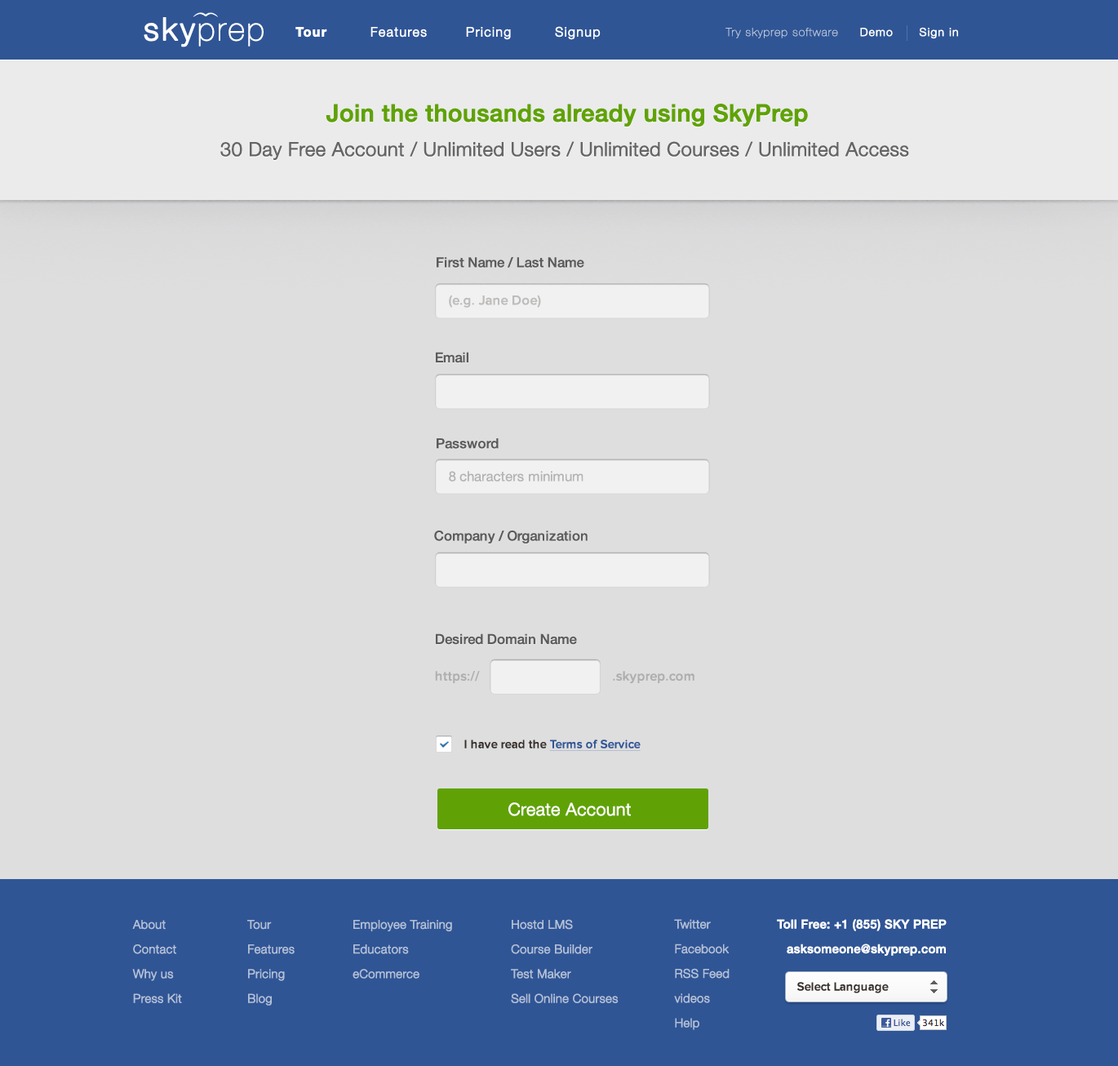
<style>
.page{position:relative;width:1118px;height:1066px;background:#dededf}
.page>*{position:absolute;margin:0}
.t1{font:31.8px "HelveticaNeue-UltraLight";letter-spacing:0.06em;color:#ffffff;font-weight:bold}
.t2{font:31.8px "HelveticaNeue-Light";letter-spacing:0.06em;color:#ffffff;font-weight:bold}
.t3{font:13px "HelveticaNeue-Light";letter-spacing:0.06em;color:#ffffff;font-weight:bold}
.t4{font:13px "HelveticaNeue-Bold";letter-spacing:0.06em;color:#ffffff;font-weight:bold}
.t5{font:11.1px "HelveticaNeue-UltraLight";letter-spacing:0.06em;color:#bac5d9;font-weight:bold}
.t6{font:11.1px "HelveticaNeue-Light";letter-spacing:0.06em;color:#ffffff;font-weight:bold}
.t7{font:23.7px "HelveticaNeue-Medium";color:#60a205;font-weight:bold}
.t8{font:19.1px "HelveticaNeue-Light";color:#656565;font-weight:bold}
.t9{font:13.7px "HelveticaNeue-Medium";color:#5b5b5b}
.t10{font:13.7px "ProximaNova-Semibold";color:#bebdbc}
.t11{font:13.7px "HelveticaNeue";color:#b3b3b3}
.t12{font:13.7px "ProximaNova-Semibold";color:#b0aeae}
.t13{font:12.2px "ProximaNova-Semibold";color:#2f5595;text-decoration:underline}
.t14{font:12.2px "ProximaNova-Semibold";color:#372f2b}
.t15{font:17.2px "HelveticaNeue-Light";color:#ffffff;font-weight:bold}
.t16{font:12.1px/24.7px "HelveticaNeue-Light";color:#b4c0d6;font-weight:bold}
.t17{font:12.1px/24.7px "HelveticaNeue-Medium";color:#ffffff;font-weight:bold}
.t18{font:12.2px "ProximaNova-Semibold";color:#404040}
</style>
<div class="page">
<p class="t1" style="left:144px;top:17px;width:120px;height:30px"><span class="t2">sky</span>prep</p>
<p class="t3" style="left:296px;top:26px;width:305px;height:14px"><span class="t4">Tour         </span>Features        Pricing         Signup</p>
<p class="t5" style="left:726px;top:28px;width:112px;height:10px">Try skyprep software</p>
<p class="t6" style="left:860px;top:27px;width:98px;height:12px">Demo Sign in</p>
<p class="t7" style="left:326px;top:104px;width:482px;height:23px">Join the thousands already using SkyPrep</p>
<p class="t8" style="left:220px;top:141px;width:689px;height:19px">30 Day Free Account / Unlimited Users / Unlimited Courses / Unlimited Access</p>
<p class="t9" style="left:437px;top:257px;width:148px;height:11px">First Name / Last Name</p>
<p class="t10" style="left:449px;top:295px;width:92px;height:13px">(e.g. Jane Doe)</p>
<p class="t9" style="left:436px;top:352px;width:33px;height:11px">Email</p>
<p class="t9" style="left:437px;top:438px;width:62px;height:11px">Password</p>
<p class="t11" style="left:449px;top:471px;width:135px;height:11px">8 characters minimum</p>
<p class="t9" style="left:434px;top:531px;width:154px;height:13px">Company / Organization</p>
<p class="t9" style="left:436px;top:634px;width:141px;height:11px">Desired Domain Name</p>
<p class="t12" style="left:435px;top:671px;width:45px;height:12px">https://</p>
<p class="t12" style="left:613px;top:671px;width:82px;height:12px">.skyprep.com</p>
<p class="t13" style="left:465px;top:740px;width:176px;height:11px"><span class="t14">I have read the </span>Terms of Service</p>
<p class="t15" style="left:509px;top:802px;width:122px;height:14px">Create Account</p>
<p class="t16" style="left:132px;top:920px;width:50px;height:83px">About<br>Contact<br>Why us<br>Press Kit</p>
<p class="t16" style="left:247px;top:920px;width:48px;height:86px">Tour<br>Features<br>Pricing<br>Blog</p>
<p class="t16" style="left:353px;top:920px;width:99px;height:59px">Employee Training<br>Educators<br>eCommerce</p>
<p class="t16" style="left:511px;top:919px;width:108px;height:84px">Hostd LMS<br>Course Builder<br>Test Maker<br>Sell Online Courses</p>
<p class="t16" style="left:674px;top:919px;width:56px;height:111px">Twitter<br>Facebook<br>RSS Feed<br>videos<br>Help</p>
<p class="t17" style="left:777px;top:919px;width:170px;height:37px;text-align:right">Toll Free: +1 (855) SKY PREP<br>asksomeone@skyprep.com</p>
<p class="t18" style="left:798px;top:982px;width:91px;height:12px">Select Language</p>
</div>
